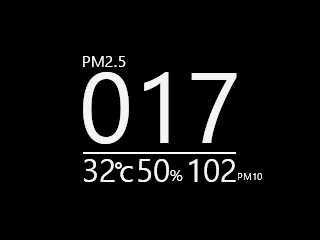
<style>
.page{position:relative;width:320px;height:240px;background:#000000}
.page>*{position:absolute;margin:0}
.t1{font:16px "LeelawadeeUI";color:#ffffff}
.t2{font:100px "LeelawadeeUI";color:#f4f4f4}
.t3{font:32px "LeelawadeeUI";color:#f4f4f4}
.t4{font:32px "LeelawadeeUI";color:#ffffff}
.t5{font:10px "LeelawadeeUI";color:#ffffff}
</style>
<div class="page">
<p class="t1" style="left:83px;top:56px;width:43px;height:11px">PM2.5</p>
<p class="t2" style="left:83px;top:72px;width:154px;height:72px">017</p>
<p class="t3" style="left:84px;top:159px;width:31px;height:23px">32</p>
<p class="t3" style="left:138px;top:159px;width:31px;height:23px">50</p>
<p class="t3" style="left:189px;top:159px;width:47px;height:23px">102</p>
<p class="t4" style="left:120px;top:166px;width:13px;height:16px">c</p>
<p class="t1" style="left:170px;top:170px;width:13px;height:11px">%</p>
<p class="t5" style="left:238px;top:173px;width:24px;height:7px">PM10</p>
</div>
